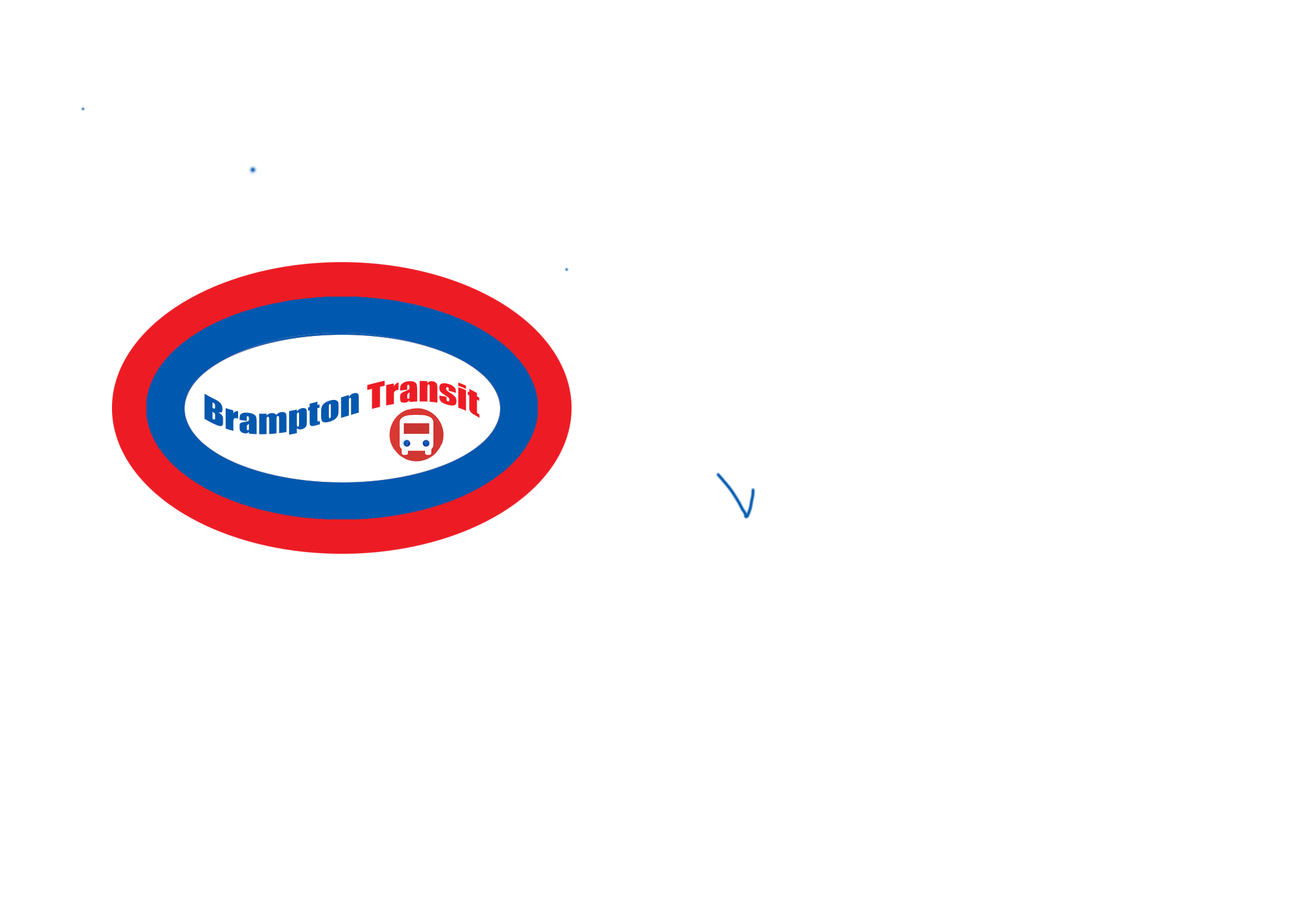
<style>
.page{position:relative;width:1292px;height:923px;background:#ffffff}
.page>*{position:absolute;margin:0}
.t1{font:31.7px "Impact";color:#0058af;scale:1.23 1}
.t2{font:31.7px "Impact";color:#ed1c24;scale:1.23 1}
</style>
<div class="page">
<p class="t1" style="left:204px;top:380px;width:276px;height:55px">Brampton <span class="t2">Transit</span></p>
</div>
